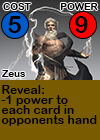
<style>
.page{position:relative;width:100px;height:140px;background:#795b01}
.page>*{position:absolute;margin:0}
.t1{font:9.7px "ArialRoundedMTBold";letter-spacing:0.01em;color:#000000}
.t2{font:24px "ArialRoundedMTBold";letter-spacing:0.01em;color:#000000}
.t3{font:24px "ArialRoundedMTBold";letter-spacing:-0.1em;color:#000000}
.t4{font:12px/10px "ArialRoundedMTBold";letter-spacing:0.01em;color:#000000}
</style>
<div class="page">
<p class="t1" style="left:3px;top:3px;width:28px;height:7px">COST</p>
<p class="t1" style="left:60px;top:3px;width:38px;height:7px">POWER</p>
<p class="t2" style="left:8px;top:16px;width:13px;height:17px">5</p>
<p class="t3" style="left:75px;top:16px;width:13px;height:17px">9</p>
<p class="t1" style="left:1px;top:70px;width:25px;height:7px">Zeus</p>
<p class="t4" style="left:1px;top:85px;width:96px;height:41px">Reveal:<br>-1 power to <br>each card in <br>opponents hand</p>
</div>
